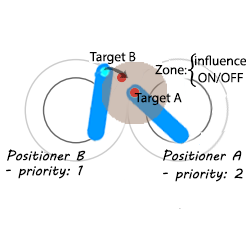
<style>
.page{position:relative;width:246px;height:231px;background:#ffffff}
.page>*{position:absolute;margin:0}
.t1{font:23.3px "MyriadPro-Regular";color:#000000}
.t2{font:23.3px "MVBoli";color:#000000}
</style>
<div class="page">
<p class="t1" style="left:89px;top:51px;width:47px;height:14px">Target B</p>
<p class="t1" style="left:155px;top:65px;width:32px;height:10px">Zone:</p>
<p class="t1" style="left:194px;top:55px;width:53px;height:11px">influence</p>
<p class="t1" style="left:198px;top:72px;width:45px;height:11px">ON/OFF</p>
<p class="t1" style="left:134px;top:93px;width:48px;height:13px">Target A</p>
<p class="t2" style="left:7px;top:149px;width:79px;height:12px">Positioner B</p>
<p class="t2" style="left:163px;top:149px;width:79px;height:12px">Positioner A</p>
<p class="t2" style="left:6px;top:165px;width:77px;height:14px">- priority: 1</p>
<p class="t2" style="left:163px;top:168px;width:80px;height:14px">- priority: 2</p>
</div>
